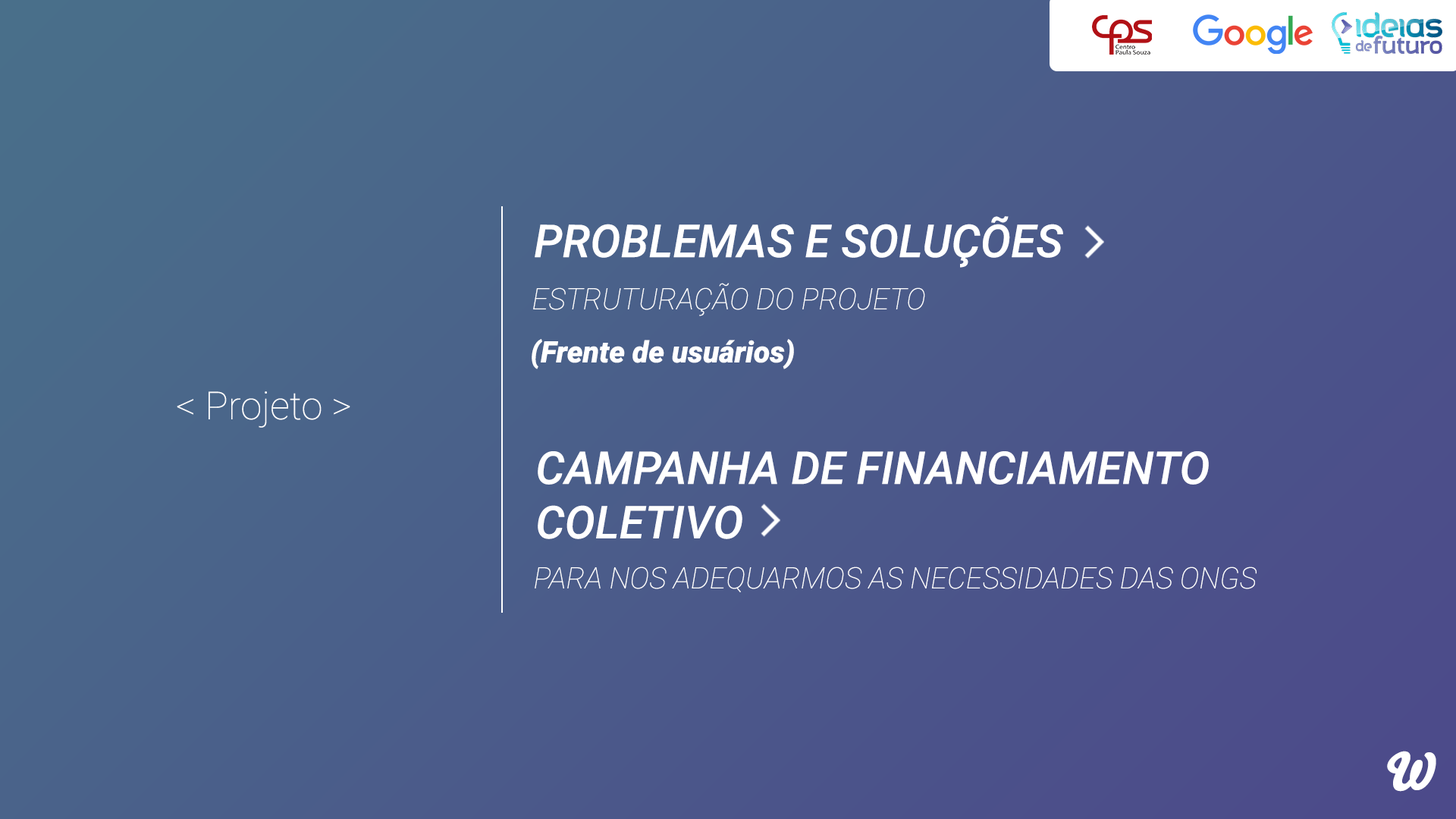
<style>
.page{position:relative;width:1456px;height:819px}
.page>*{position:absolute;margin:0}
.t1{font:45.4px "Roboto-MediumItalic";color:#ffffff}
.t2{font:29.6px "Roboto-ThinItalic";color:#ffffff}
.t3{font:29.6px "Roboto-BlackItalic";color:#ffffff}
.t4{font:38.5px "Roboto-Thin";color:#ffffff}
.t5{font:45.3px "Roboto-MediumItalic";color:#ffffff}
.t6{font:50.8px "Bello-Pro";color:#ffffff}
</style>
<div class="page">
<p class="t1" style="left:535px;top:216px;width:528px;height:52px">PROBLEMAS E SOLUÇÕES</p>
<p class="t2" style="left:533px;top:283px;width:392px;height:33px">ESTRUTURAÇÃO DO PROJETO</p>
<p class="t3" style="left:532px;top:339px;width:262px;height:30px">(Frente de usuários)</p>
<p class="t4" style="left:177px;top:391px;width:173px;height:37px">&lt; Projeto &gt;</p>
<p class="t5" style="left:538px;top:451px;width:671px;height:88px">CAMPANHA DE FINANCIAMENTO <br>COLETIVO</p>
<p class="t2" style="left:535px;top:566px;width:722px;height:26px">PARA NOS ADEQUARMOS AS NECESSIDADES DAS ONGS</p>
<p class="t6" style="left:1387px;top:751px;width:49px;height:41px">W</p>
</div>
